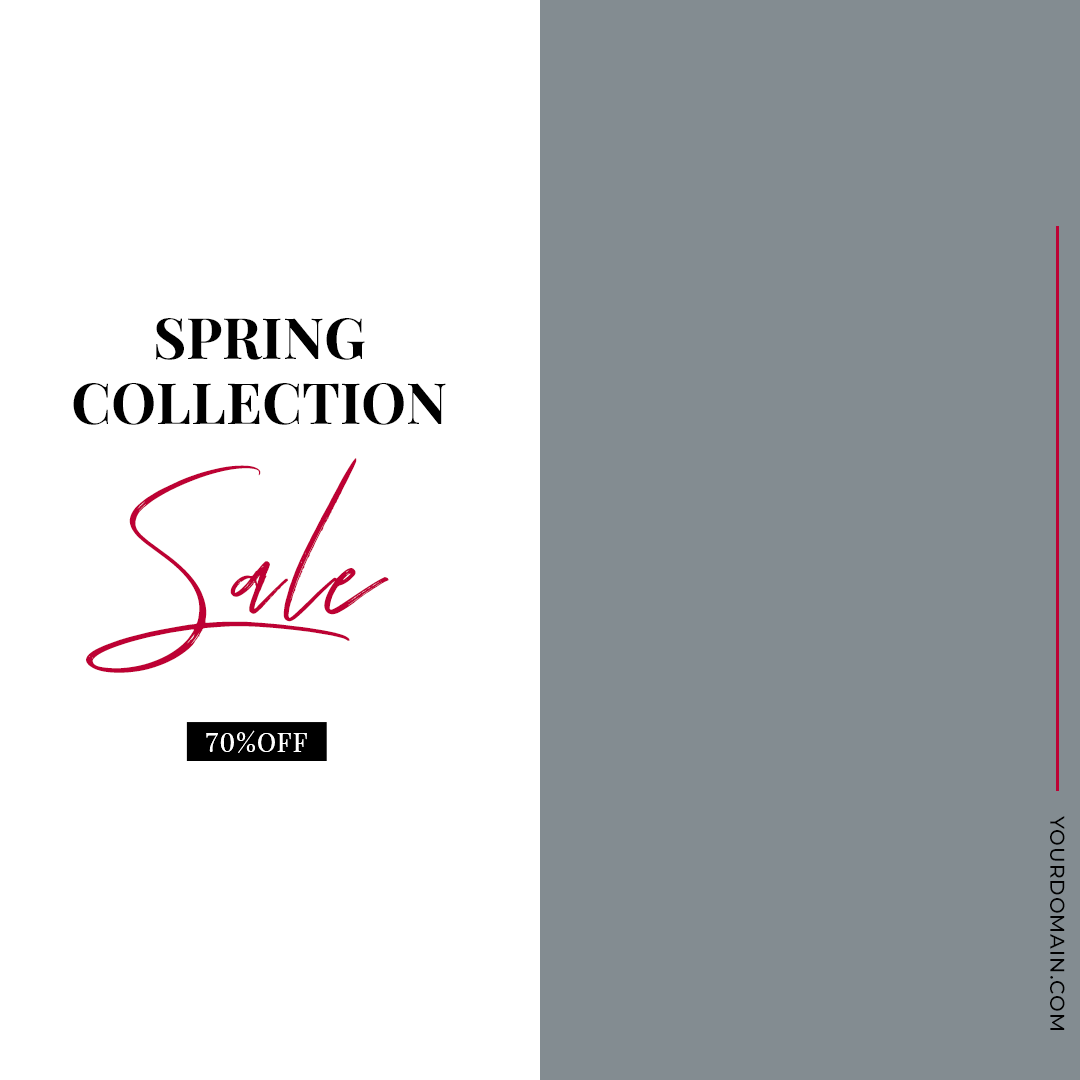
<style>
.page{position:relative;width:1080px;height:1080px;background:#838c91}
.page>*{position:absolute;margin:0}
.t1{font:57px/64.1px "PlayfairDisplay-Bold";color:#000000;text-transform:uppercase}
.t2{font:149.3px "TuesdayNight-Regular";letter-spacing:0.05em;color:#bd0134}
.t3{font:25.4px "PlayfairDisplay-Regular";letter-spacing:0.05em;color:#ffffff;text-transform:uppercase}
.t4{font:20px "Montserrat-Medium";letter-spacing:0.05em;color:#000000;text-transform:uppercase}
</style>
<div class="page">
<p class="t1" style="left:73px;top:318px;width:373px;height:107px;text-align:center">Spring<br>Collection</p>
<p class="t2" style="left:86px;top:458px;width:303px;height:215px">Sale</p>
<p class="t3" style="left:206px;top:730px;width:101px;height:23px">70%Off</p>
<p class="t4" style="left:1050px;top:816px;width:15px;height:214px;rotate:90deg">Yourdomain.com</p>
</div>
